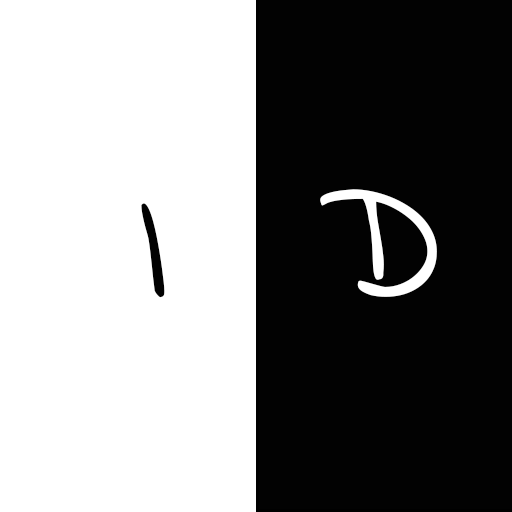
<style>
.page{position:relative;width:512px;height:512px;background:#ffffff}
.page>*{position:absolute;margin:0}
.t1{font:168px "IndieFlower";color:#ffffff}
.t2{font:168px "IndieFlower";color:#020202}
</style>
<div class="page">
<p class="t1" style="left:320px;top:189px;width:117px;height:108px">D</p>
<p class="t2" style="left:141px;top:203px;width:24px;height:95px">I</p>
</div>
